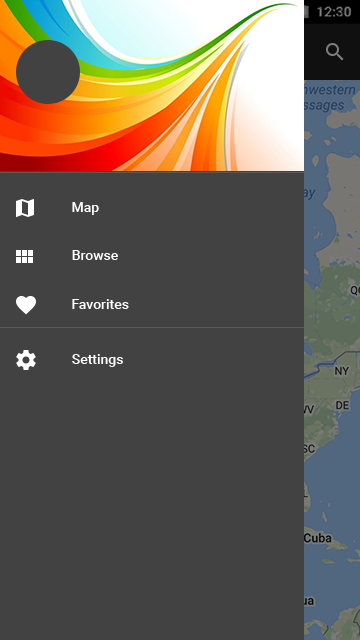
<style>
.page{position:relative;width:360px;height:640px;background:#424242}
.page>*{position:absolute;margin:0}
.t1{font:14px "Roboto-Medium";color:#ffffff}
</style>
<div class="page">
<p class="t1" style="left:72px;top:202px;width:27px;height:13px">Map</p>
<p class="t1" style="left:72px;top:250px;width:46px;height:10px">Browse</p>
<p class="t1" style="left:72px;top:299px;width:57px;height:10px">Favorites</p>
<p class="t1" style="left:72px;top:354px;width:51px;height:13px">Settings</p>
</div>
